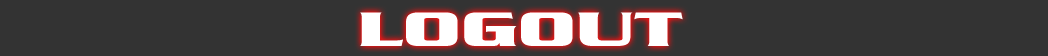
<style>
.page{position:relative;width:1048px;height:56px;background:#333333}
.page>*{position:absolute;margin:0}
.t1{font:52.1px "Babylon5";color:#ffffff;scale:1.43 1}
</style>
<div class="page">
<p class="t1" style="left:360px;top:12px;width:323px;height:34px">LOGOUT</p>
</div>
